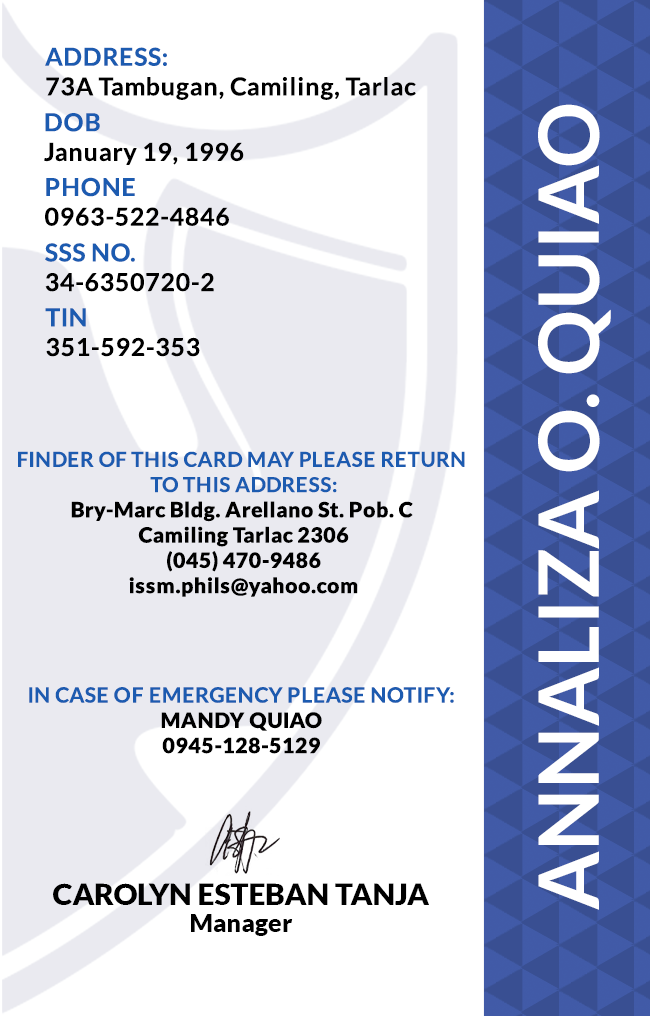
<style>
.page{position:relative;width:650px;height:1016px;background:#ffffff}
.page>*{position:absolute;margin:0}
.t1{font:24.7px/29.6px "Lato-Bold";letter-spacing:0.025em;color:#000000}
.t2{font:83.3px "Lato-Bold";color:#ffffff}
.t3{font:24.7px/29.6px "Lato-Bold";letter-spacing:0.025em}
.t4{font:21.1px "Lato-Black";letter-spacing:0.025em}
.t5{font:20.5px/25.3px "Lato-Bold";letter-spacing:0.025em;text-transform:uppercase}
.t6{font:21.1px/25.3px "Lato-Bold";letter-spacing:0.025em}
.t7{font:29.5px "Lato-Black";color:#000000}
.t8{font:25px "Lato-Black";color:#000000}
</style>
<div class="page">
<p class="t1" style="left:45px;top:47px;width:371px;height:53px">ADDRESS:<br>73A Tambugan, Camiling, Tarlac</p>
<p class="t1" style="left:44px;top:113px;width:200px;height:52px">DOB<br>January 19, 1996</p>
<p class="t2" style="left:538px;top:104px;width:73px;height:806px;rotate:-90deg">ANNALIZA O. QUIAO</p>
<p class="t3" style="left:45px;top:177px;width:184px;height:49px">PHONE <br>0963-522-4846</p>
<p class="t3" style="left:45px;top:243px;width:169px;height:49px">SSS NO.<br>34-6350720-2</p>
<p class="t1" style="left:45px;top:308px;width:155px;height:49px">TIN<br>351-592-353</p>
<p class="t4" style="left:18px;top:451px;width:447px;height:146px;text-align:center"><span class="t5">Finder of this card may please return <br>to this address:<br></span>Bry-Marc Bldg. Arellano St. Pob. C <br>Camiling Tarlac 2306<br>(045) 470-9486<br>issm.phils@yahoo.com</p>
<p class="t6" style="left:29px;top:687px;width:425px;height:67px;text-align:center">IN CASE OF EMERGENCY PLEASE NOTIFY:<br><span class="t4">MANDY QUIAO<br>0945-128-5129</span></p>
<p class="t7" style="left:53px;top:883px;width:376px;height:22px">CAROLYN ESTEBAN TANJA</p>
<p class="t8" style="left:191px;top:914px;width:102px;height:22px">Manager</p>
</div>
